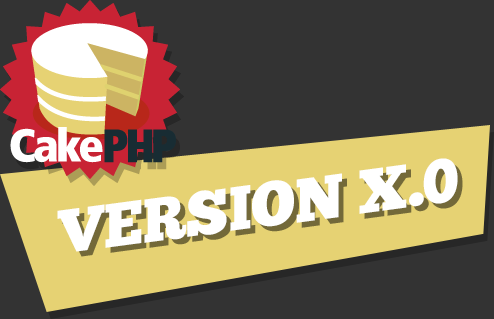
<style>
.page{position:relative;width:494px;height:319px;background:#333333}
.page>*{position:absolute;margin:0}
.t1{font:62px "ChunkFive-Roman";color:#ffffff;text-transform:uppercase;scale:0.97 1}
</style>
<div class="page">
<p class="t1" style="left:57px;top:158px;width:401px;height:94px;rotate:-8deg">VERSION x.0</p>
</div>
